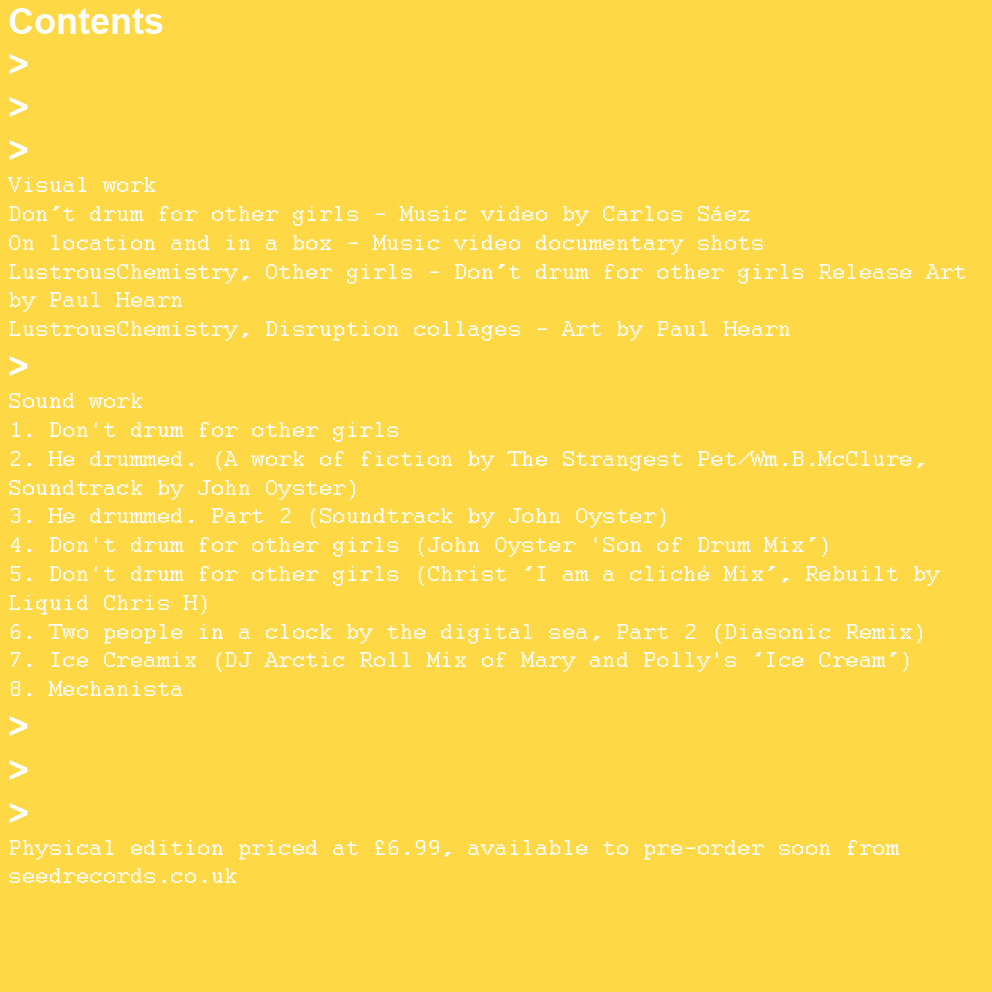
<style>
.page{position:relative;width:992px;height:992px;background:#ffd845}
.page>*{position:absolute;margin:0}
.t1{font:24px "Courier";color:#ffffff}
.t2{font:36px "Arial-BoldMT";color:#ffffff}
</style>
<div class="page">
<p class="t1" style="left:7px;top:8px;width:959px;height:875px"><span class="t2">Contents<br>&gt;<br>&gt;<br>&gt;<br></span>Visual work<br>Don’t drum for other girls - Music video by Carlos Sáez     <br>On location and in a box - Music video documentary shots<br>LustrousChemistry, Other girls - Don’t drum for other girls Release Art by Paul Hearn<br>LustrousChemistry, Disruption collages - Art by Paul Hearn<br><span class="t2">&gt;<br></span>Sound work<br>1. Don't drum for other girls    <br>2. He drummed. (A work of fiction by The Strangest Pet/Wm.B.McClure, Soundtrack by John Oyster)<br>3. He drummed. Part 2 (Soundtrack by John Oyster)<br>4. Don't drum for other girls (John Oyster 'Son of Drum Mix’)<br>5. Don't drum for other girls (Christ ‘I am a cliché Mix’, Rebuilt by Liquid Chris H) <br>6. Two people in a clock by the digital sea, Part 2 (Diasonic Remix)<br>7. Ice Creamix (DJ Arctic Roll Mix of Mary and Polly's ‘Ice Cream’)<br>8. Mechanista<br><span class="t2">&gt;<br>&gt;<br>&gt;<br></span>Physical edition priced at £6.99, available to pre-order soon from seedrecords.co.uk</p>
</div>
